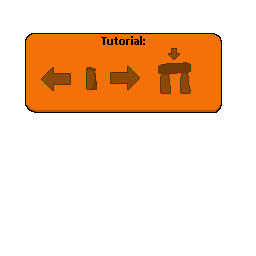
<style>
.page{position:relative;width:256px;height:256px;background:#ffffff}
.page>*{position:absolute;margin:0}
.t1{font:12.5px "Calibri-Bold";color:#000000}
</style>
<div class="page">
<p class="t1" style="left:101px;top:36px;width:44px;height:9px">Tutorial:</p>
</div>
